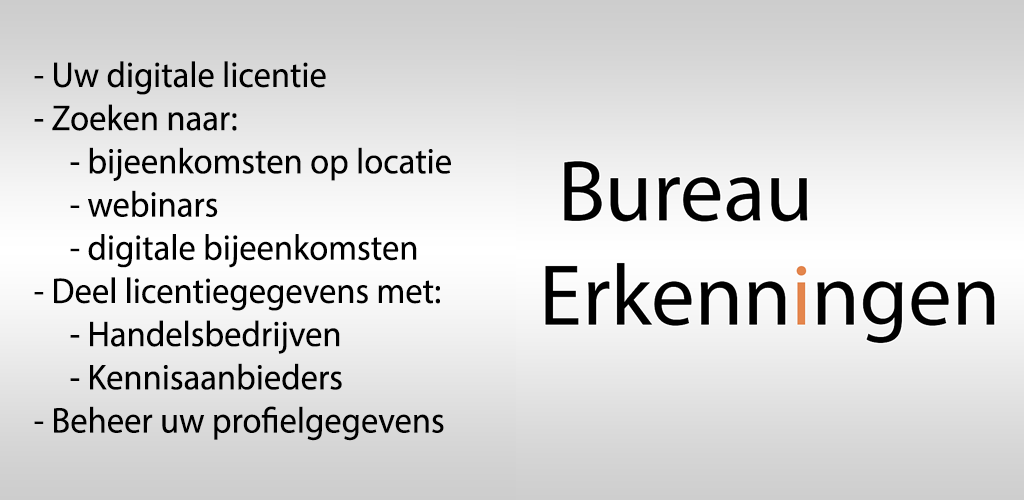
<style>
.page{position:relative;width:1024px;height:500px}
.page>*{position:absolute;margin:0}
.t1{font:36px "MyriadPro-Regular";color:#000000;scale:0.96 1}
</style>
<div class="page">
<p class="t1" style="left:34px;top:61px;width:417px;height:380px">- Uw digitale licentie<br>- Zoeken naar:<br> - bijeenkomsten op locatie<br> - webinars<br> - digitale bijeenkomsten<br>- Deel licentiegegevens met:<br> - Handelsbedrijven<br> - Kennisaanbieders<br>- Beheer uw profielgegevens</p>
</div>
